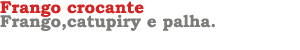
<style>
.page{position:relative;width:300px;height:50px;background:#ffffff}
.page>*{position:absolute;margin:0}
.t1{font:17px "BookmanOldStyle-Bold";color:#d42525}
.t2{font:17px "BookmanOldStyle-Bold";color:#7c7c79}
</style>
<div class="page">
<p class="t1" style="left:0px;top:1px;width:144px;height:16px">Frango crocante</p>
<p class="t2" style="left:0px;top:14px;width:215px;height:17px">Frango,catupiry e palha.</p>
</div>
